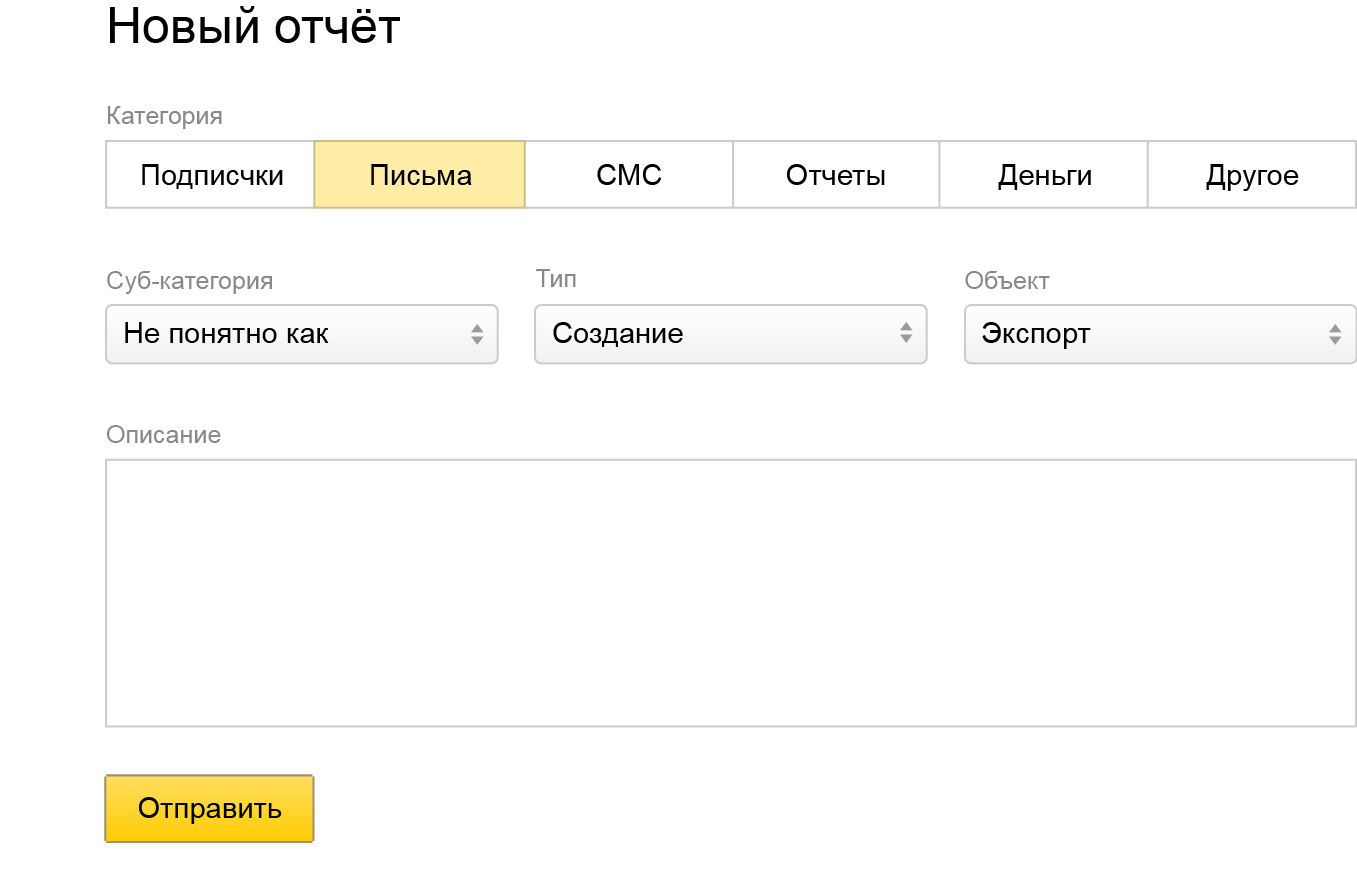
<style>
.page{position:relative;width:1357px;height:878px;background:#ffffff}
.page>*{position:absolute;margin:0}
.t1{font:50px "ArialMT";color:#000000}
.t2{font:25px "ArialMT";color:#898989}
.t3{font:29.2px "ArialMT";color:#000000}
</style>
<div class="page">
<p class="t1" style="left:110px;top:6px;width:290px;height:37px">Новый отчёт</p>
<p class="t2" style="left:108px;top:106px;width:114px;height:23px">Категория</p>
<p class="t3" style="left:142px;top:164px;width:141px;height:25px">Подписчки</p>
<p class="t3" style="left:371px;top:164px;width:101px;height:21px">Письма</p>
<p class="t3" style="left:597px;top:164px;width:65px;height:21px">СMC</p>
<p class="t3" style="left:787px;top:164px;width:98px;height:21px">Отчеты</p>
<p class="t3" style="left:998px;top:164px;width:93px;height:26px">Деньги</p>
<p class="t3" style="left:1206px;top:164px;width:93px;height:27px">Другое</p>
<p class="t2" style="left:536px;top:269px;width:40px;height:18px">Тип</p>
<p class="t2" style="left:107px;top:271px;width:165px;height:23px">Суб-категория</p>
<p class="t2" style="left:965px;top:271px;width:85px;height:18px">Объект</p>
<p class="t3" style="left:125px;top:322px;width:204px;height:21px">Не понятно как</p>
<p class="t3" style="left:553px;top:322px;width:130px;height:25px">Создание</p>
<p class="t3" style="left:982px;top:322px;width:109px;height:27px">Экспорт</p>
<p class="t2" style="left:107px;top:425px;width:114px;height:18px">Описание</p>
<p class="t3" style="left:139px;top:797px;width:143px;height:27px">Отправить</p>
</div>
